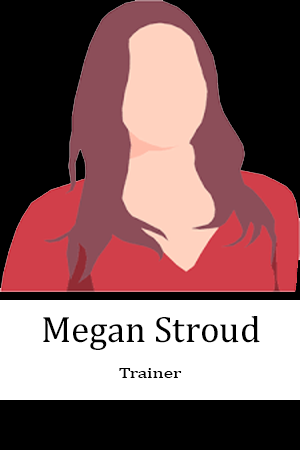
<style>
.page{position:relative;width:300px;height:450px;background:#000000}
.page>*{position:absolute;margin:0}
.t1{font:37.3px "Cambria";color:#000000}
.t2{font:15.2px "Cambria";color:#000000;scale:1.29 1}
</style>
<div class="page">
<p class="t1" style="left:43px;top:316px;width:217px;height:34px">Megan Stroud</p>
<p class="t2" style="left:119px;top:368px;width:63px;height:10px">Trainer</p>
</div>
